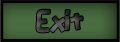
<style>
.page{position:relative;width:120px;height:42px}
.page>*{position:absolute;margin:0}
.t1{font:32px "Animated"}
</style>
<div class="page">
<p class="t1" style="left:36px;top:9px;width:47px;height:24px">Exit</p>
</div>
